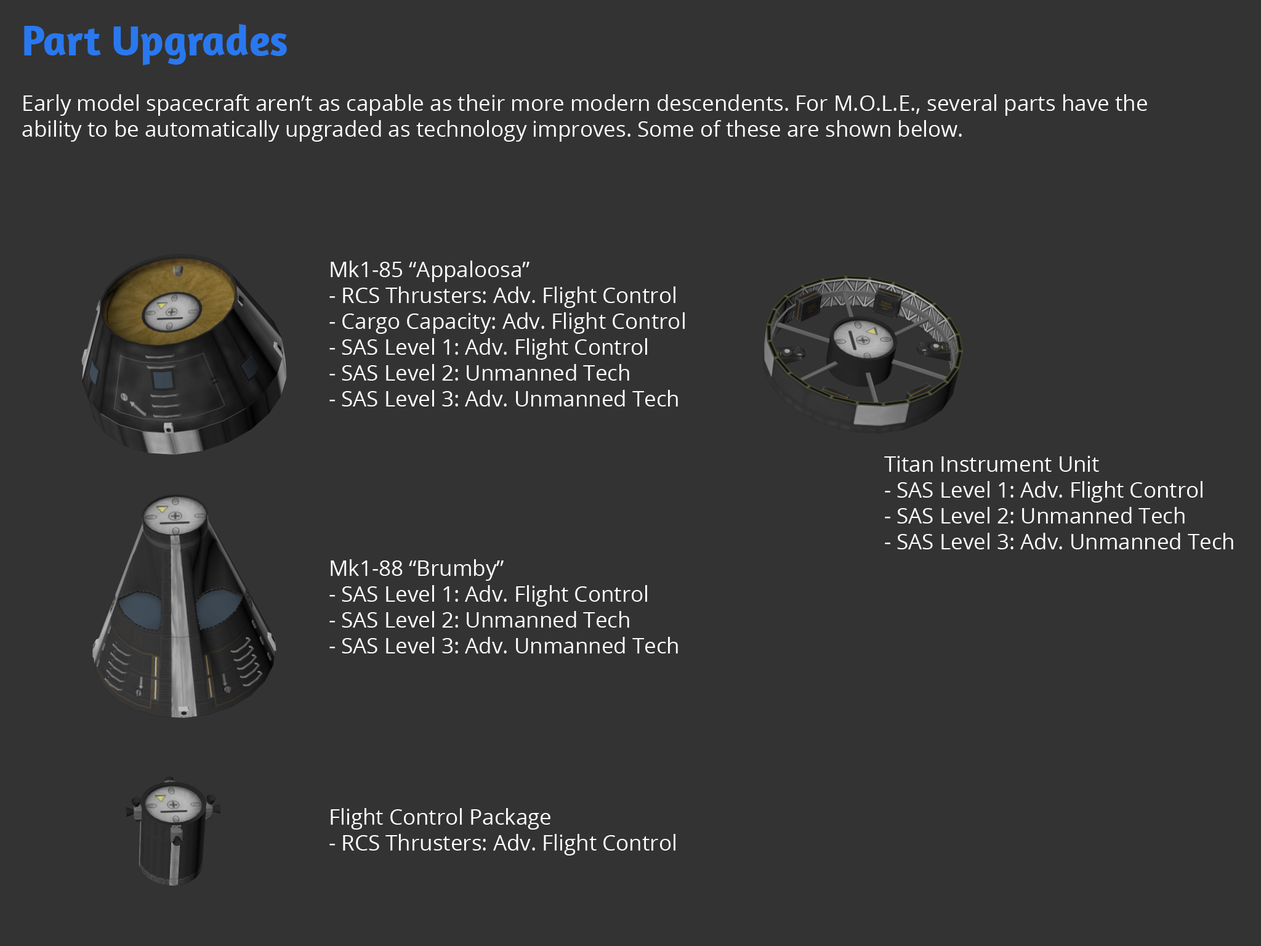
<style>
.page{position:relative;width:1261px;height:946px;background:#333333}
.page>*{position:absolute;margin:0}
.t1{font:43.1px "Amaranth-Bold";color:#2978ef}
.t2{font:21.5px "OpenSans";color:#ffffff}
</style>
<div class="page">
<p class="t1" style="left:24px;top:24px;width:263px;height:41px">Part Upgrades</p>
<p class="t2" style="left:22px;top:94px;width:1125px;height:48px">Early model spacecraft aren’t as capable as their more modern descendents. For M.O.L.E., several parts have the ability to be automatically upgraded as technology improves. Some of these are shown below.</p>
<p class="t2" style="left:329px;top:260px;width:356px;height:146px">Mk1-85 “Appaloosa”<br>- RCS Thrusters: Adv. Flight Control<br>- Cargo Capacity: Adv. Flight Control<br>- SAS Level 1: Adv. Flight Control<br>- SAS Level 2: Unmanned Tech<br>- SAS Level 3: Adv. Unmanned Tech</p>
<p class="t2" style="left:884px;top:456px;width:349px;height:93px">Titan Instrument Unit<br>- SAS Level 1: Adv. Flight Control<br>- SAS Level 2: Unmanned Tech<br>- SAS Level 3: Adv. Unmanned Tech</p>
<p class="t2" style="left:329px;top:559px;width:349px;height:94px">Mk1-88 “Brumby”<br>- SAS Level 1: Adv. Flight Control<br>- SAS Level 2: Unmanned Tech<br>- SAS Level 3: Adv. Unmanned Tech</p>
<p class="t2" style="left:329px;top:808px;width:346px;height:47px">Flight Control Package<br>- RCS Thrusters: Adv. Flight Control</p>
</div>
